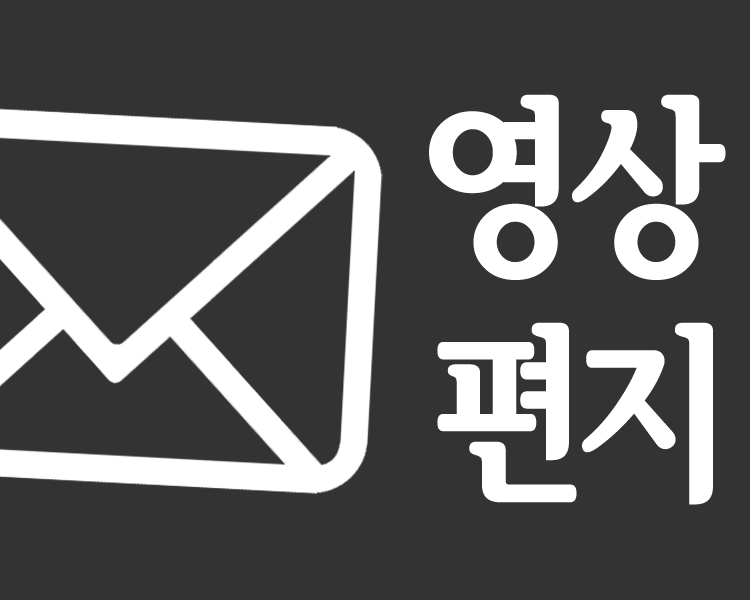
<style>
.page{position:relative;width:750px;height:600px;background:#333333}
.page>*{position:absolute;margin:0}
.t1{font:190px "SeoulHangangCBL";color:#ffffff}
</style>
<div class="page">
<p class="t1" style="left:429px;top:94px;width:297px;height:411px;text-align:right">영상<br>편지</p>
</div>
